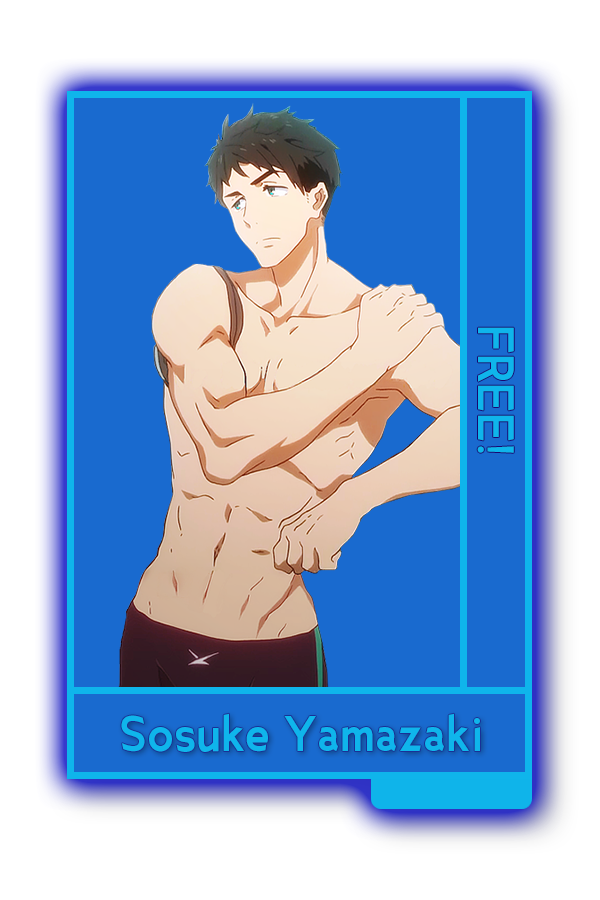
<style>
.page{position:relative;width:600px;height:900px;background:#196acf}
.page>*{position:absolute;margin:0}
.t1{font:47.8px "Ancillary-Bold";color:#0fb5eb}
.t2{font:46.7px "Ancillary-Bold";color:#0fb5eb}
</style>
<div class="page">
<p class="t1" style="left:477px;top:327px;width:37px;height:126px;rotate:90deg">FREE!</p>
<p class="t2" style="left:121px;top:713px;width:359px;height:39px">Sosuke Yamazaki</p>
</div>
